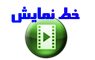
<style>
.page{position:relative;width:95px;height:60px;background:#ffffff}
.page>*{position:absolute;margin:0}
.t1{font:15px "SinaBold";color:#0507f4}
</style>
<div class="page">
<p class="t1" style="left:11px;top:6px;width:69px;height:17px">خط نمايش</p>
</div>
